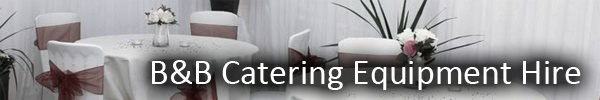
<style>
.page{position:relative;width:600px;height:100px}
.page>*{position:absolute;margin:0}
.t1{font:36px "Calibri";color:#ffffff}
</style>
<div class="page">
<p class="t1" style="left:152px;top:60px;width:429px;height:30px">B&amp;B Catering Equipment Hire</p>
</div>
